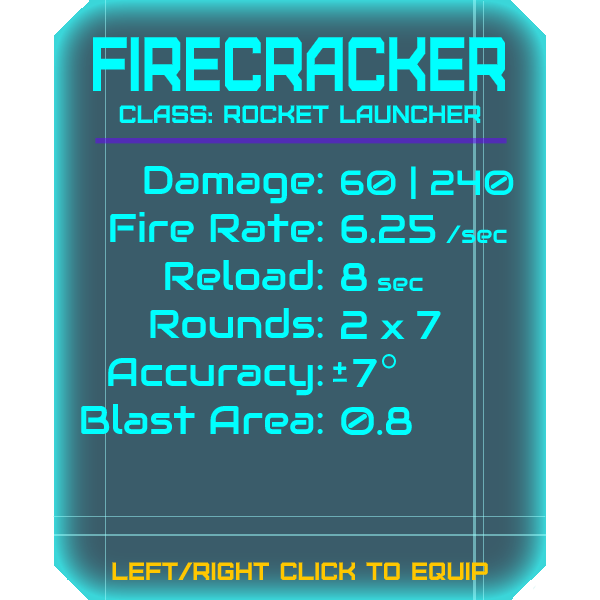
<style>
.page{position:relative;width:600px;height:600px;background:#3a5c6a}
.page>*{position:absolute;margin:0}
.t1{font:76.8px "Furore";color:#00ffff;scale:0.74 1}
.t2{font:25px "Furore";color:#00ffff}
.t3{font:40px "Audiowide-Regular";color:#00ffff}
.t4{font:35px "Audiowide-Regular";color:#00ffff}
.t5{font:25px "Audiowide-Regular";color:#00ffff}
.t6{font:25px "Furore";color:#ffc700}
</style>
<div class="page">
<p class="t1" style="left:93px;top:37px;width:412px;height:54px">firecracker</p>
<p class="t2" style="left:119px;top:105px;width:362px;height:18px">Class: rocket launcher</p>
<p class="t3" style="left:81px;top:165px;width:242px;height:269px;text-align:right">Damage:<br>Fire Rate:<br>Reload:<br>Rounds:<br>Accuracy:<br>Blast Area:</p>
<p class="t4" style="left:341px;top:166px;width:173px;height:269px">60 | 240<br><span class="t3">6.25 </span><span class="t5">/sec<br></span><span class="t3">8</span><span class="t5"> sec<br></span><span class="t3">2 </span>x <span class="t3">7<br> 7<br>0.8</span></p>
<p class="t6" style="left:112px;top:562px;width:376px;height:18px">left/right click to equip</p>
</div>
